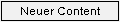
<style>
.page{position:relative;width:120px;height:22px;background:#f1f1f1}
.page>*{position:absolute;margin:0}
.t1{font:10.8px "ArialMT";color:#000000;scale:1.1 1}
</style>
<div class="page">
<p class="t1" style="left:21px;top:7px;width:79px;height:8px">Neuer Content</p>
</div>
